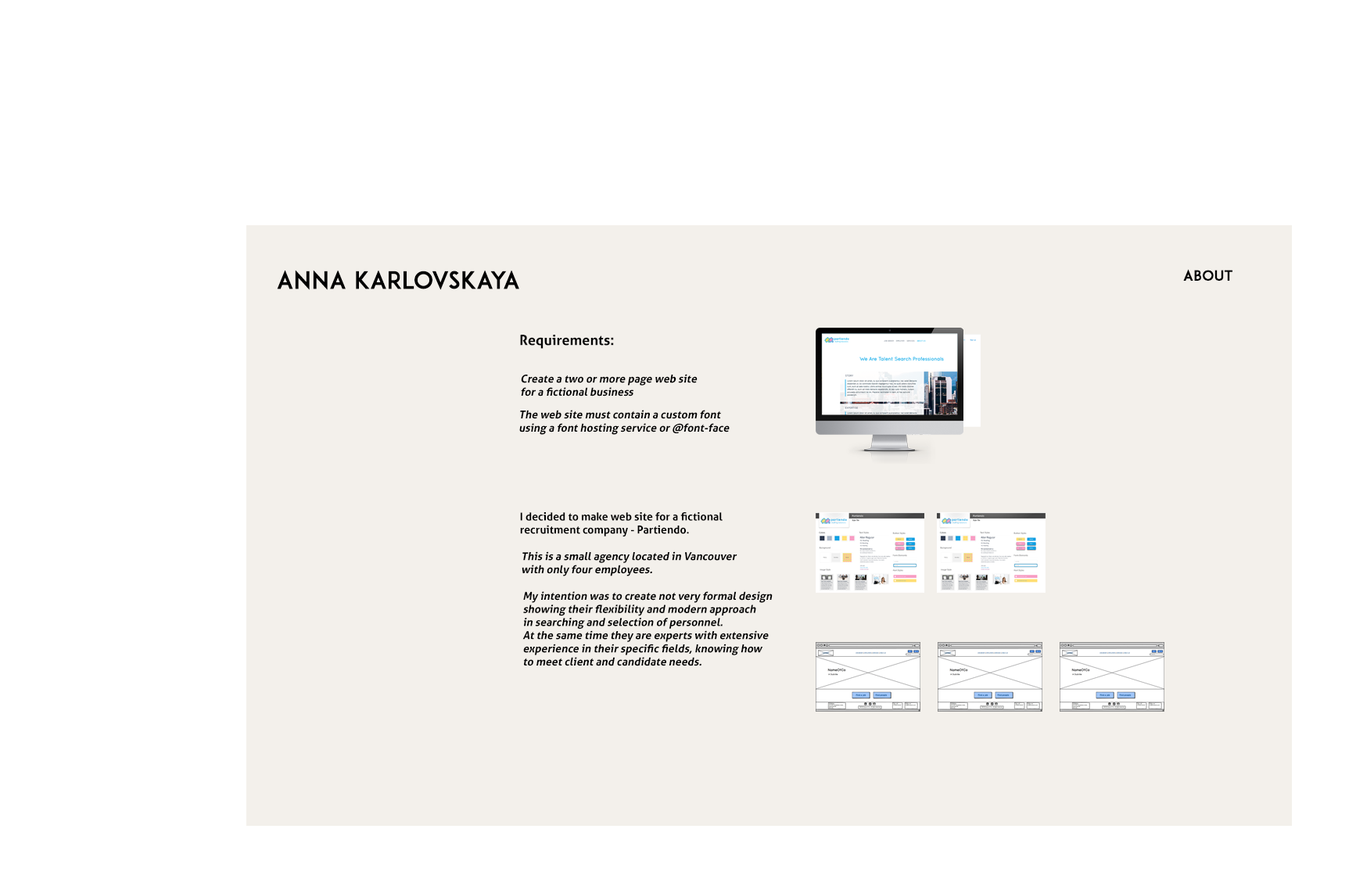
<style>
.page{position:relative;width:1356px;height:879px;background:#ffffff}
.page>*{position:absolute;margin:0}
.t1{font:23.5px "ADAM.CGPRO";color:#000000;font-weight:bold}
.t2{font:14.1px "ADAM.CGPRO";color:#000000;font-weight:bold}
.t3{font:14.1px "Aller-Bold";color:#000000}
.t4{font:11px "Aller-Bold";color:#000000;font-style:italic}
.t5{font:11px "Aller-Bold";color:#000000}
</style>
<div class="page">
<p class="t1" style="left:277px;top:270px;width:242px;height:20px">ANNA KARLOVSKAYA</p>
<p class="t2" style="left:1183px;top:269px;width:50px;height:12px">ABOUT</p>
<p class="t3" style="left:520px;top:335px;width:94px;height:14px">Requirements:</p>
<p class="t4" style="left:521px;top:374px;width:177px;height:23px">Create a two or more page web site <br>for a fictional business</p>
<p class="t4" style="left:519px;top:410px;width:211px;height:25px">The web site must contain a custom font <br>using a font hosting service or @font-face</p>
<p class="t5" style="left:520px;top:512px;width:203px;height:25px">I decided to make web site for a fictional <br>recruitment company - Partiendo.</p>
<p class="t4" style="left:522px;top:551px;width:216px;height:25px">This is a small agency located in Vancouver <br>with only four employees.</p>
<p class="t4" style="left:522px;top:591px;width:251px;height:75px">My intention was to create not very formal design <br>showing their flexibility and modern approach <br>in searching and selection of personnel. <br>At the same time they are experts with extensive <br>experience in their specific fields, knowing how <br>to meet client and candidate needs.</p>
</div>
